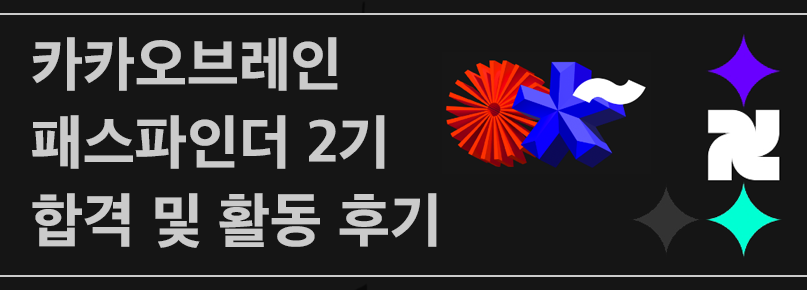
<style>
.page{position:relative;width:807px;height:290px;background:#151515}
.page>*{position:absolute;margin:0}
.t1{font:60px/78px "AppleSDGothicNeoEB00";color:#cbcbcb}
</style>
<div class="page">
<p class="t1" style="left:32px;top:37px;width:405px;height:211px">카카오브레인<br>패스파인더 2기<br>합격 및 활동 후기</p>
</div>
